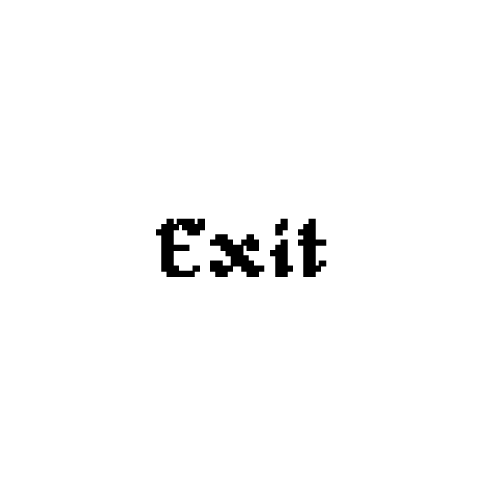
<style>
.page{position:relative;width:500px;height:500px;background:#ffffff}
.page>*{position:absolute;margin:0}
.t1{font:83.2px "Alagard";color:#000000;font-weight:bold}
</style>
<div class="page">
<p class="t1" style="left:156px;top:218px;width:171px;height:59px">Exit</p>
</div>
